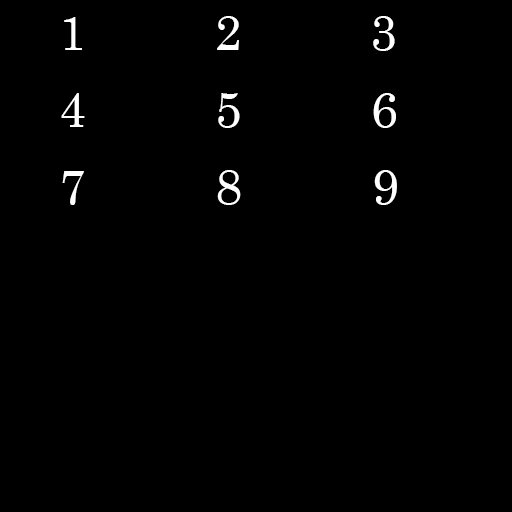
<style>
.page{position:relative;width:512px;height:512px;background:#000000}
.page>*{position:absolute;margin:0}
.t1{font:48px "Century";color:#ffffff}
</style>
<div class="page">
<p class="t1" style="left:64px;top:17px;width:18px;height:33px">1</p>
<p class="t1" style="left:217px;top:16px;width:22px;height:34px">2</p>
<p class="t1" style="left:373px;top:16px;width:22px;height:35px">3</p>
<p class="t1" style="left:61px;top:93px;width:24px;height:34px">4</p>
<p class="t1" style="left:218px;top:93px;width:22px;height:35px">5</p>
<p class="t1" style="left:373px;top:93px;width:23px;height:35px">6</p>
<p class="t1" style="left:62px;top:171px;width:22px;height:34px">7</p>
<p class="t1" style="left:217px;top:170px;width:24px;height:35px">8</p>
<p class="t1" style="left:374px;top:170px;width:23px;height:35px">9</p>
</div>
